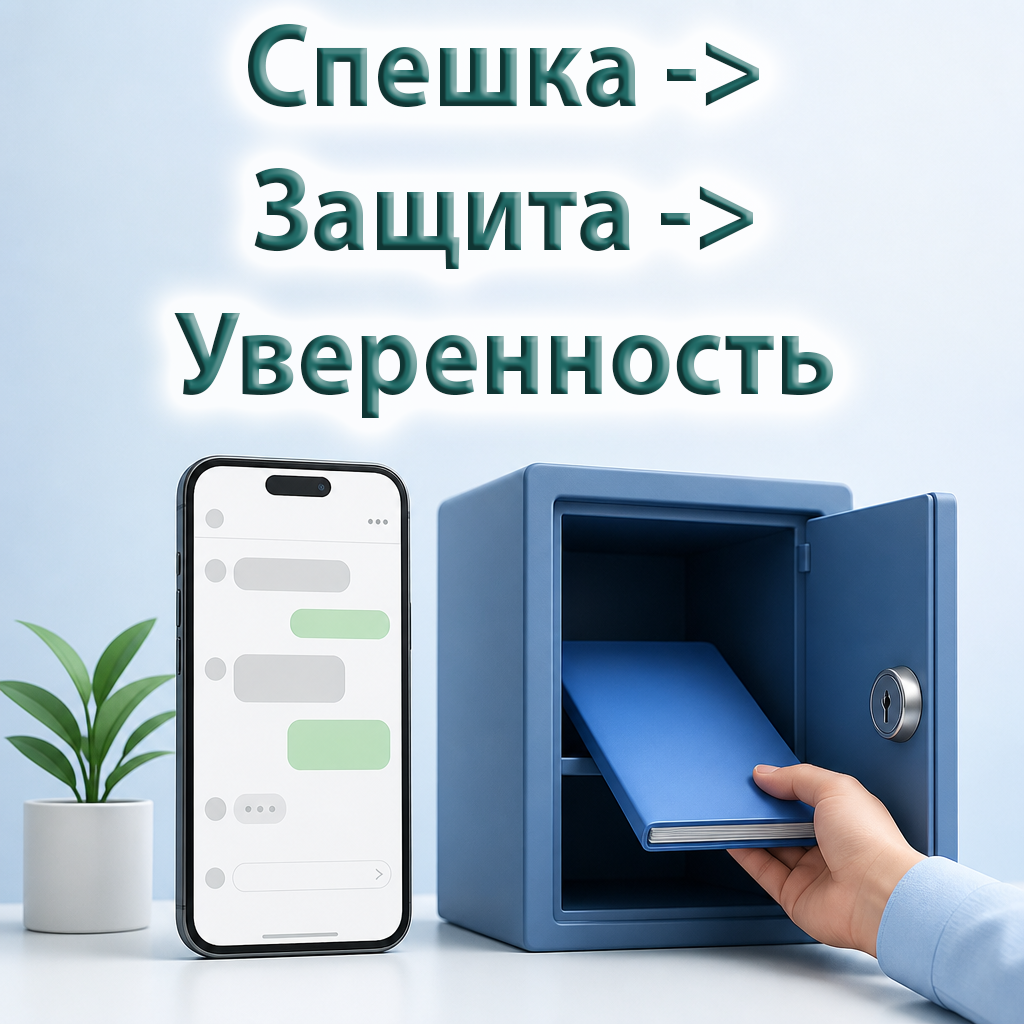
<style>
.page{position:relative;width:1024px;height:1024px}
.page>*{position:absolute;margin:0}
.t1{font:120px "MyriadPro-Bold";scale:0.92 1}
</style>
<div class="page">
<p class="t1" style="left:174px;top:24px;width:659px;height:394px;text-align:center">Спешка -&gt;<br>Защита -&gt;<br>Уверенность</p>
</div>
